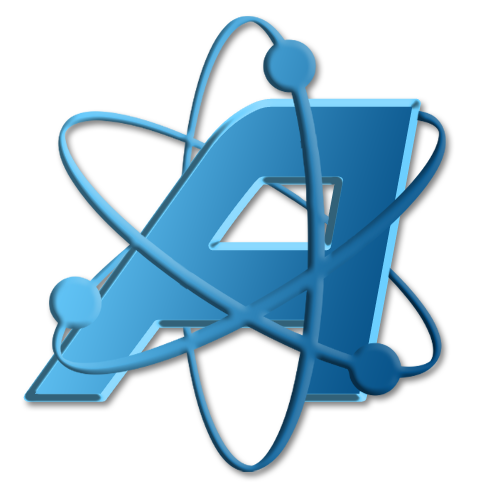
<style>
.page{position:relative;width:487px;height:487px;background:#ffffff}
.page>*{position:absolute;margin:0}
.t1{font:609.8px "GhostClanExpandedItalic";scale:0.69 1}
</style>
<div class="page">
<p class="t1" style="left:27px;top:102px;width:390px;height:296px">A</p>
</div>
